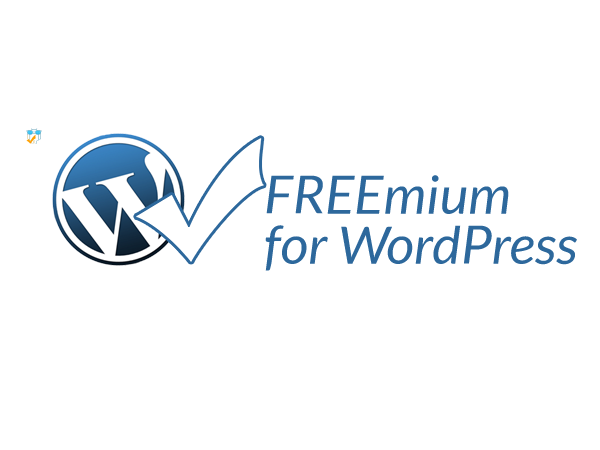
<style>
.page{position:relative;width:600px;height:450px;background:#ffffff}
.page>*{position:absolute;margin:0}
.t1{font:53px/50px "Lato-Italic";color:#2d689c;scale:1.03 1}
</style>
<div class="page">
<p class="t1" style="left:265px;top:175px;width:312px;height:96px">FREEmium <br>for WordPress</p>
</div>
